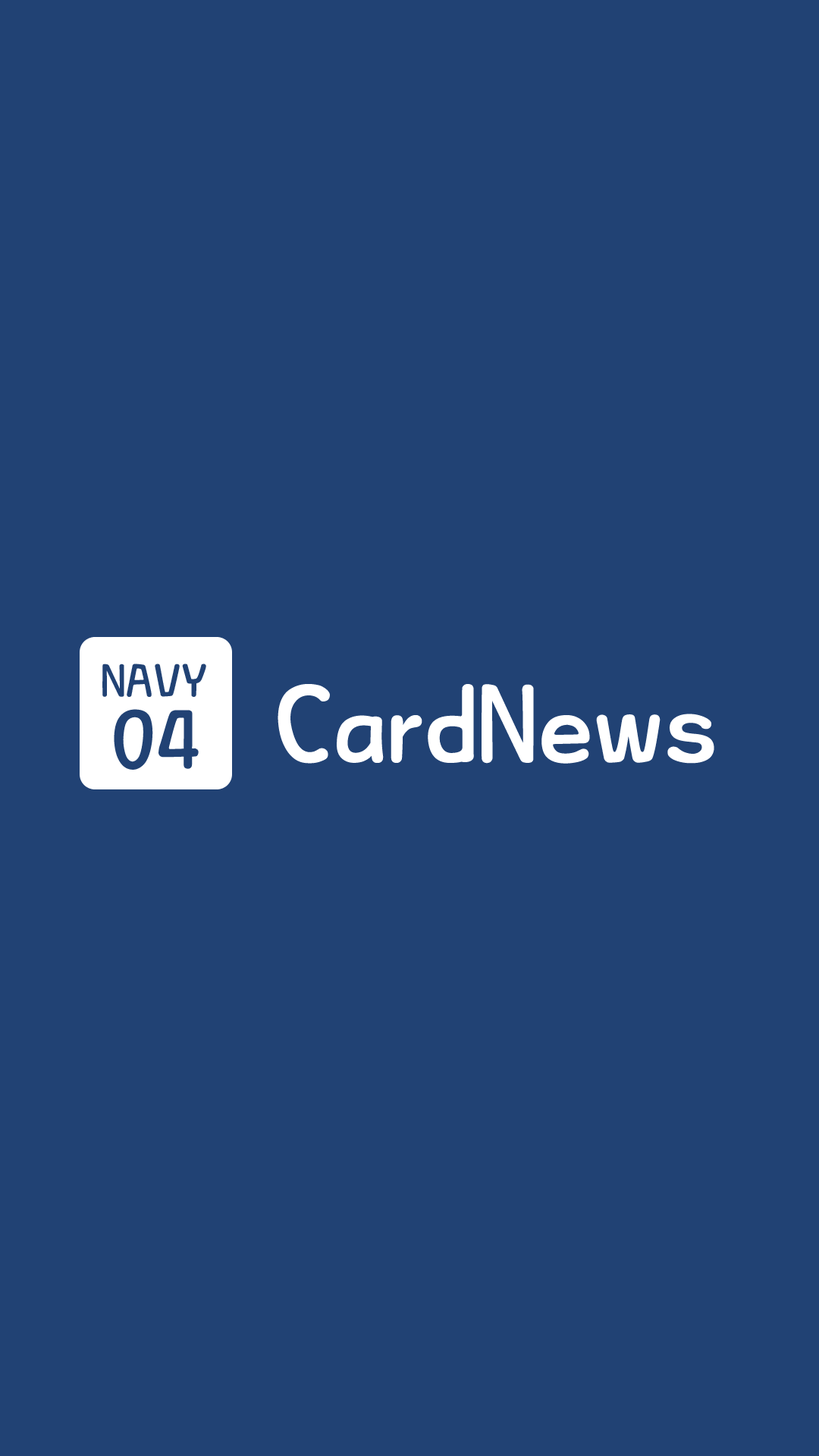
<style>
.page{position:relative;width:819px;height:1456px;background:#214274}
.page>*{position:absolute;margin:0}
.t1{font:44.2px "THEAlien";color:#214274}
.t2{font:106.2px "THEAlien";color:#ffffff}
.t3{font:79.6px "THEAlien";color:#214274}
</style>
<div class="page">
<p class="t1" style="left:102px;top:664px;width:104px;height:33px">NAVY</p>
<p class="t2" style="left:278px;top:684px;width:436px;height:80px">CardNews</p>
<p class="t3" style="left:114px;top:709px;width:85px;height:61px">04</p>
</div>
